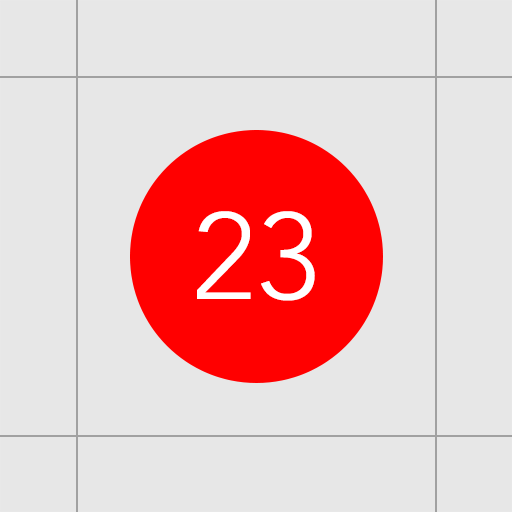
<style>
.page{position:relative;width:512px;height:512px;background:#e7e7e7}
.page>*{position:absolute;margin:0}
.t1{font:122px "Avenir-Light";color:#ffffff}
</style>
<div class="page">
<p class="t1" style="left:197px;top:211px;width:118px;height:90px">23</p>
</div>
